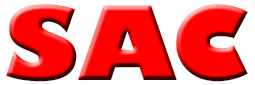
<style>
.page{position:relative;width:255px;height:85px;background:#ffffff}
.page>*{position:absolute;margin:0}
.t1{font:100px "GillSans-UltraBold"}
</style>
<div class="page">
<p class="t1" style="left:6px;top:4px;width:242px;height:78px">SAC</p>
</div>
